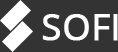
<style>
.page{position:relative;width:118px;height:52px;background:#333333}
.page>*{position:absolute;margin:0}
.t1{font:36px "OpenSans";color:#ffffff;font-weight:bold}
</style>
<div class="page">
<p class="t1" style="left:42px;top:14px;width:76px;height:27px">SOFI</p>
</div>
